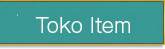
<style>
.page{position:relative;width:165px;height:49px}
.page>*{position:absolute;margin:0}
.t1{font:20px "GothicMB101Pro-Light";color:#fbfbf9}
</style>
<div class="page">
<p class="t1" style="left:35px;top:17px;width:95px;height:16px">Toko Item</p>
</div>
